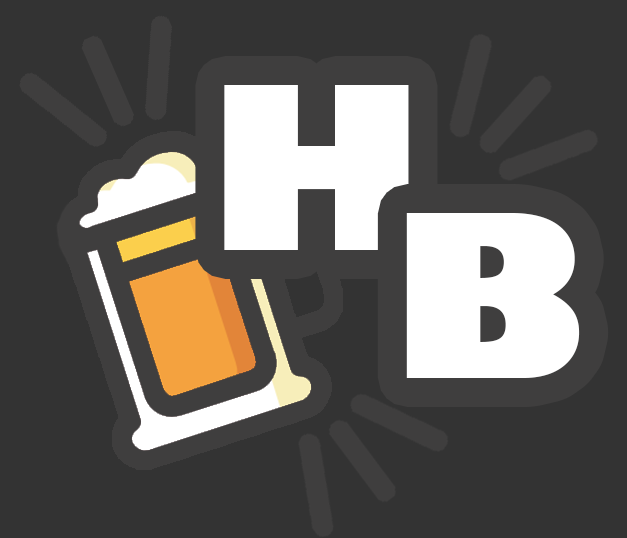
<style>
.page{position:relative;width:627px;height:538px;background:#333333}
.page>*{position:absolute;margin:0}
.t1{font:222px "GillSans-UltraBold";letter-spacing:-0.12em;color:#ffffff}
</style>
<div class="page">
<p class="t1" style="left:224px;top:85px;width:185px;height:165px">H</p>
<p class="t1" style="left:406px;top:213px;width:174px;height:165px">B</p>
</div>
